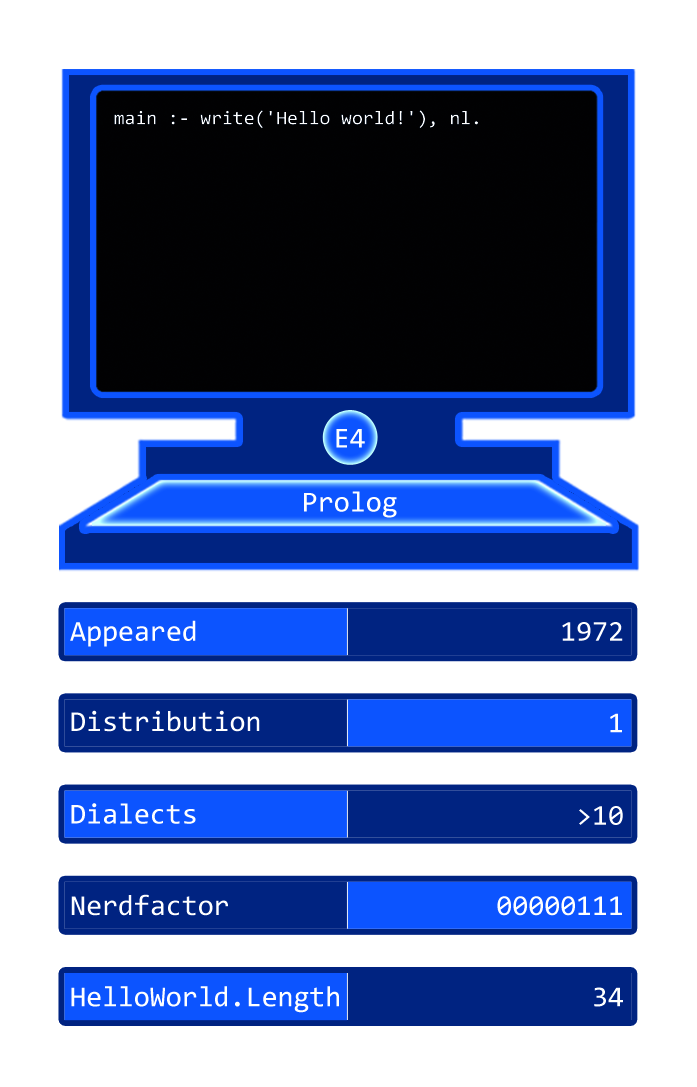
<style>
.page{position:relative;width:697px;height:1087px;background:#ffffff}
.page>*{position:absolute;margin:0}
.t1{font:19.3px "Consolas";color:#ffffff}
.t2{font:29px "Consolas";color:#ffffff}
</style>
<div class="page">
<p class="t1" style="left:114px;top:110px;width:364px;height:19px">main :- write('Hello world!'), nl.</p>
<p class="t2" style="left:336px;top:429px;width:29px;height:19px">E4</p>
<p class="t2" style="left:304px;top:491px;width:93px;height:27px">Prolog</p>
<p class="t2" style="left:70px;top:620px;width:126px;height:27px">Appeared</p>
<p class="t2" style="left:562px;top:622px;width:61px;height:19px">1972</p>
<p class="t2" style="left:71px;top:710px;width:189px;height:22px">Distribution</p>
<p class="t2" style="left:610px;top:713px;width:12px;height:20px">1</p>
<p class="t2" style="left:71px;top:803px;width:125px;height:21px">Dialects</p>
<p class="t2" style="left:579px;top:806px;width:44px;height:19px">&gt;10</p>
<p class="t2" style="left:71px;top:894px;width:157px;height:22px">Nerdfactor</p>
<p class="t2" style="left:497px;top:896px;width:125px;height:20px">00000111</p>
<p class="t2" style="left:71px;top:986px;width:268px;height:27px">HelloWorld.Length</p>
<p class="t2" style="left:594px;top:987px;width:29px;height:20px">34</p>
</div>
